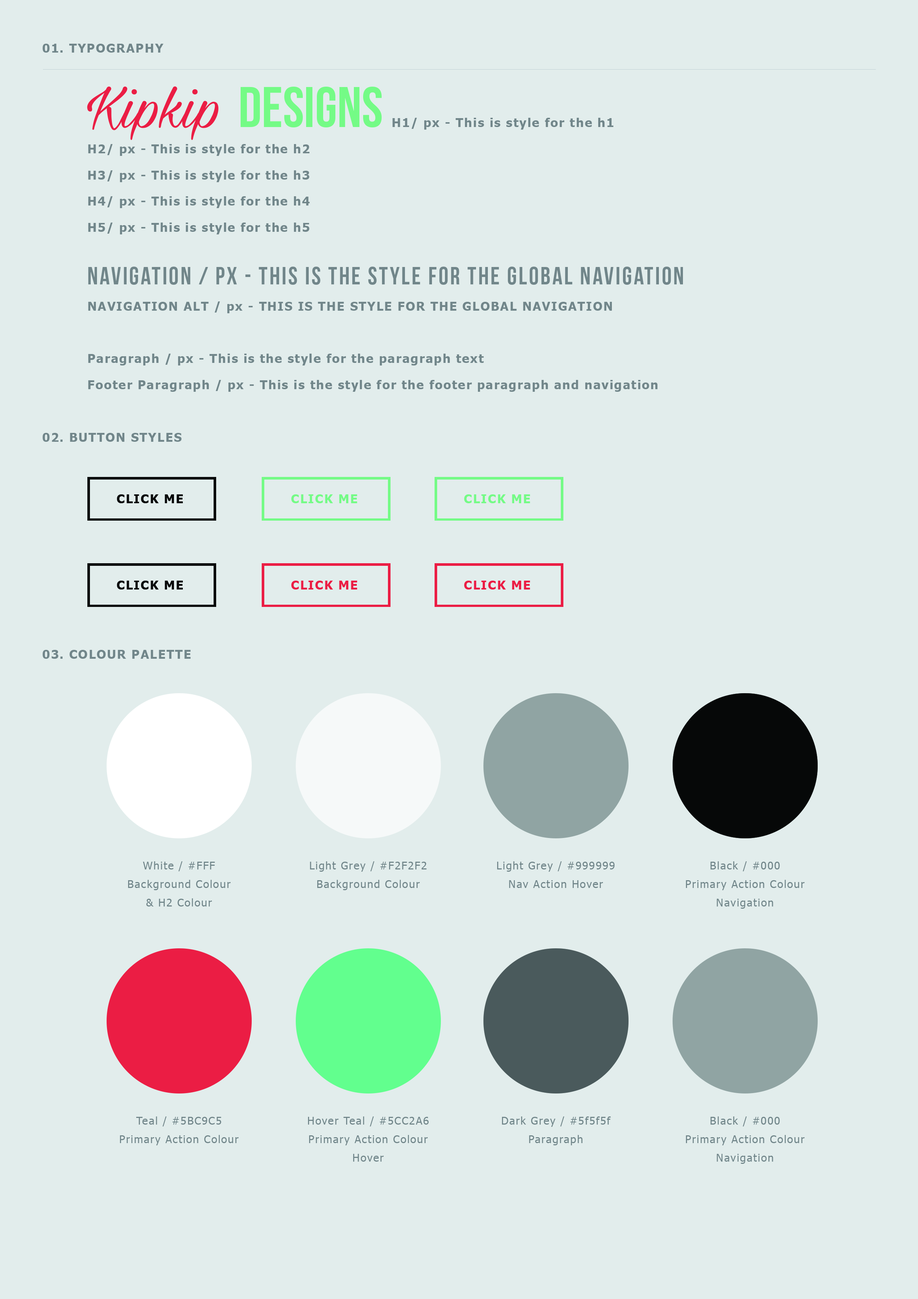
<style>
.page{position:relative;width:918px;height:1299px;background:#e2edec}
.page>*{position:absolute;margin:0}
.t1{font:12.3px "Tahoma-Bold";letter-spacing:0.075em;color:#71868a}
.t2{font:12.3px/26.2px "Tahoma-Bold";letter-spacing:0.075em;color:#71868a}
.t3{font:67.9px/6.3px "MilasianCircaPERSONAL";color:#eb1c43}
.t4{font:57.1px/6.3px "BebasNeue";color:#74fb86}
.t5{font:24.7px/26.2px "BebasNeue";letter-spacing:0.075em;color:#71868a}
.t6{font:12.3px "Tahoma-Bold";letter-spacing:0.075em;color:#070809}
.t7{font:12.3px "Tahoma-Bold";letter-spacing:0.075em;color:#74fb86}
.t8{font:12.3px "Tahoma-Bold";letter-spacing:0.075em;color:#eb1c43}
.t9{font:10.8px/18.5px "Tahoma";letter-spacing:0.075em;color:#71868a}
</style>
<div class="page">
<p class="t1" style="left:43px;top:44px;width:121px;height:9px">01. TYPOGRAPHY</p>
<p class="t2" style="left:87px;top:86px;width:596px;height:306px"><span class="t3">Kipkip </span><span class="t4">DESIGNS </span>H1/ px - This is style for the h1<br>H2/ px - This is style for the h2<br>H3/ px - This is style for the h3<br>H4/ px - This is style for the h4<br>H5/ px - This is style for the h5<br><br><span class="t5">NAVIGATION / px - THIS IS THE STYLE FOR THE GLOBAL NAVIGATION<br></span>NAVIGATION ALT / px - THIS IS THE STYLE FOR THE GLOBAL NAVIGATION<br><br>Paragraph / px - This is the style for the paragraph text<br>Footer Paragraph / px - This is the style for the footer paragraph and navigation</p>
<p class="t1" style="left:43px;top:433px;width:139px;height:9px">02. BUTTON STYLES</p>
<p class="t6" style="left:117px;top:494px;width:66px;height:9px">CLICK ME</p>
<p class="t7" style="left:291px;top:494px;width:66px;height:9px">CLICK ME</p>
<p class="t7" style="left:464px;top:494px;width:66px;height:9px">CLICK ME</p>
<p class="t6" style="left:117px;top:581px;width:66px;height:8px">CLICK ME</p>
<p class="t8" style="left:291px;top:581px;width:66px;height:8px">CLICK ME</p>
<p class="t8" style="left:464px;top:581px;width:66px;height:8px">CLICK ME</p>
<p class="t1" style="left:43px;top:650px;width:148px;height:9px">03. COLOUR PALETTE</p>
<p class="t9" style="left:128px;top:861px;width:103px;height:45px;text-align:center">White / #FFF<br>Background Colour<br>&amp; H2 Colour</p>
<p class="t9" style="left:310px;top:861px;width:117px;height:29px;text-align:center">Light Grey / #F2F2F2<br>Background Colour</p>
<p class="t9" style="left:497px;top:861px;width:118px;height:27px;text-align:center">Light Grey / #999999<br>Nav Action Hover</p>
<p class="t9" style="left:686px;top:861px;width:119px;height:48px;text-align:center">Black / #000<br>Primary Action Colour<br>Navigation</p>
<p class="t9" style="left:120px;top:1116px;width:119px;height:29px;text-align:center">Teal / #5BC9C5<br>Primary Action Colour</p>
<p class="t9" style="left:308px;top:1116px;width:121px;height:45px;text-align:center">Hover Teal / #5CC2A6<br>Primary Action Colour<br>Hover</p>
<p class="t9" style="left:502px;top:1116px;width:109px;height:29px;text-align:center">Dark Grey / #5f5f5f<br>Paragraph</p>
<p class="t9" style="left:686px;top:1116px;width:119px;height:48px;text-align:center">Black / #000<br>Primary Action Colour<br>Navigation</p>
</div>
